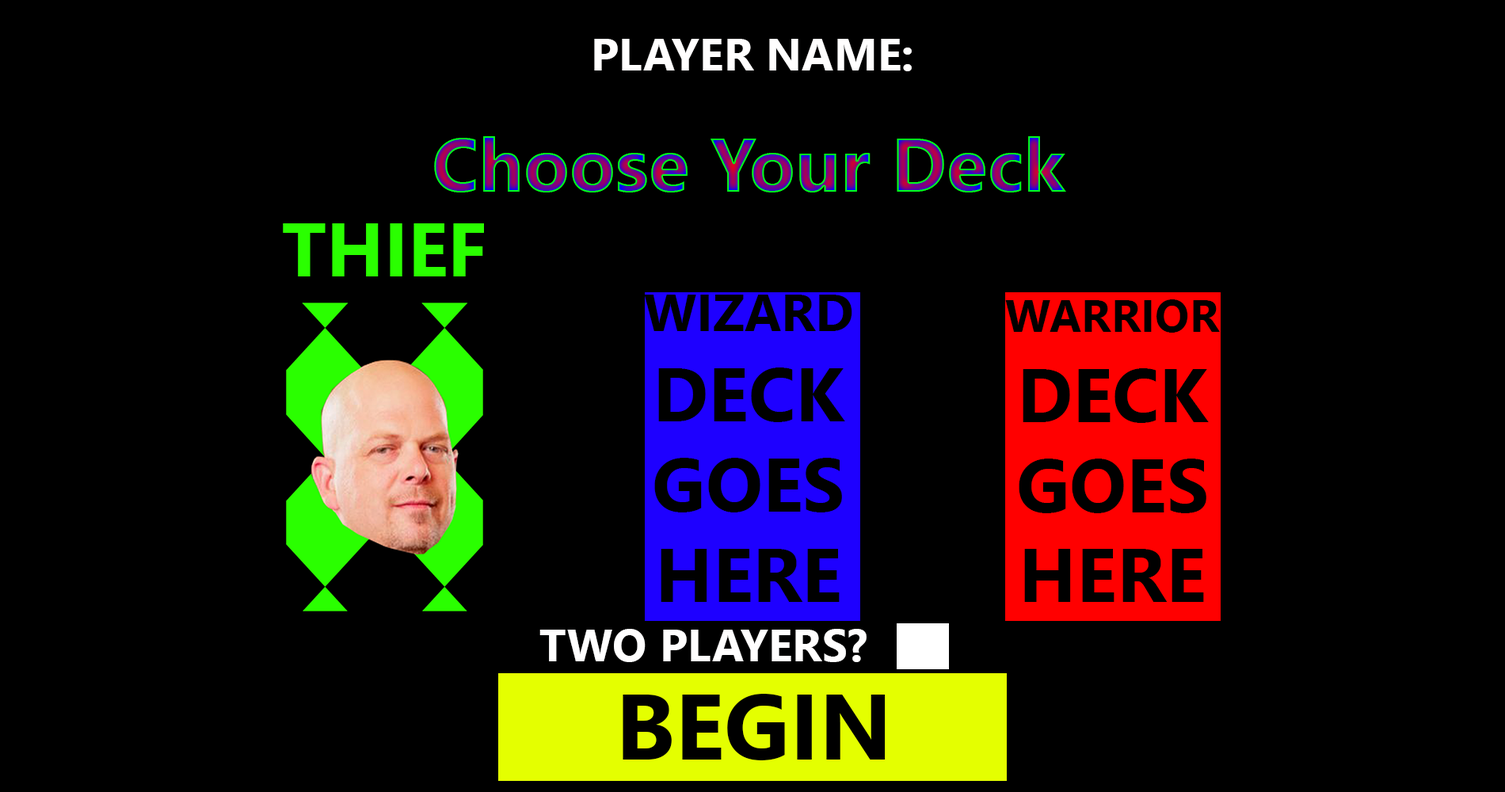
<style>
.page{position:relative;width:1505px;height:792px;background:#000000}
.page>*{position:absolute;margin:0}
.t1{font:45.5px "NirmalaUI-Bold";color:#fffefe}
.t2{font:75.2px "NirmalaUI-Bold"}
.t3{font:75.2px "NirmalaUI-Bold";color:#2aff00}
.t4{font:75.2px "NirmalaUI-Bold";color:#000000}
.t5{font:52.1px "NirmalaUI-Bold";color:#000000}
.t6{font:45.5px "NirmalaUI-Bold";color:#000000}
.t7{font:92.4px "NirmalaUI-Bold";color:#000000}
</style>
<div class="page">
<p class="t1" style="left:594px;top:39px;width:318px;height:32px">PLAYER NAME:</p>
<p class="t2" style="left:434px;top:136px;width:632px;height:57px">Choose Your Deck</p>
<p class="t3" style="left:283px;top:223px;width:201px;height:53px">THIEF</p>
<p class="t4" style="left:644px;top:295px;width:208px;height:307px;text-align:center"><span class="t5">WIZARD<br></span>DECK<br>GOES<br>HERE</p>
<p class="t4" style="left:1005px;top:299px;width:215px;height:303px;text-align:center"><span class="t6">WARRIOR<br></span>DECK<br>GOES<br>HERE</p>
<p class="t1" style="left:539px;top:629px;width:328px;height:33px">TWO PLAYERS?</p>
<p class="t7" style="left:623px;top:694px;width:263px;height:67px">BEGIN</p>
</div>
